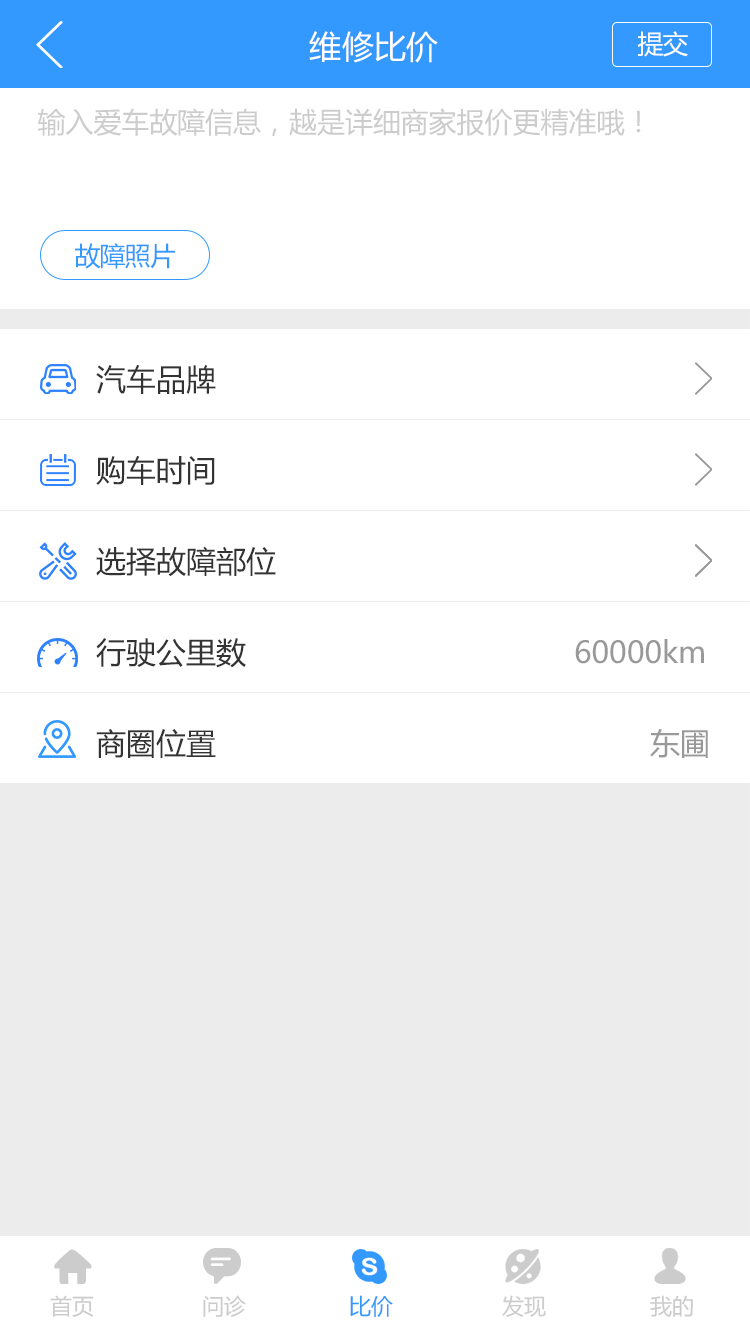
<style>
.page{position:relative;width:750px;height:1334px;background:#ffffff}
.page>*{position:absolute;margin:0}
.t1{font:32px "MicrosoftYaHei";color:#ffffff}
.t2{font:26px "MicrosoftYaHei";letter-spacing:-0.04em;color:#ffffff}
.t3{font:28px "MicrosoftYaHei";color:#cccccc}
.t4{font:26px "MicrosoftYaHei";letter-spacing:-0.04em;color:#3399ff}
.t5{font:30px "MicrosoftYaHei";color:#333333}
.t6{font:30px "MicrosoftYaHei";color:#999999}
.t7{font:22px "MicrosoftYaHei";color:#cccccc}
.t8{font:22px "MicrosoftYaHei";color:#3399ff}
</style>
<div class="page">
<p class="t1" style="left:309px;top:31px;width:129px;height:32px">维修比价</p>
<p class="t2" style="left:637px;top:31px;width:51px;height:26px">提交</p>
<p class="t3" style="left:38px;top:108px;width:603px;height:28px">输入爱车故障信息，越是详细商家报价更精准哦！</p>
<p class="t4" style="left:75px;top:243px;width:100px;height:26px">故障照片</p>
<p class="t5" style="left:96px;top:365px;width:120px;height:29px">汽车品牌</p>
<p class="t5" style="left:96px;top:456px;width:119px;height:29px">购车时间</p>
<p class="t5" style="left:96px;top:546px;width:180px;height:31px">选择故障部位</p>
<p class="t5" style="left:96px;top:638px;width:150px;height:30px">行驶公里数</p>
<p class="t6" style="left:575px;top:639px;width:129px;height:25px">60000km</p>
<p class="t5" style="left:96px;top:729px;width:120px;height:29px">商圈位置</p>
<p class="t6" style="left:650px;top:729px;width:58px;height:29px">东圃</p>
<p class="t7" style="left:50px;top:1295px;width:44px;height:22px">首页</p>
<p class="t7" style="left:203px;top:1295px;width:43px;height:22px">问诊</p>
<p class="t8" style="left:350px;top:1295px;width:43px;height:22px">比价</p>
<p class="t7" style="left:502px;top:1295px;width:44px;height:22px">发现</p>
<p class="t7" style="left:650px;top:1295px;width:43px;height:22px">我的</p>
</div>
